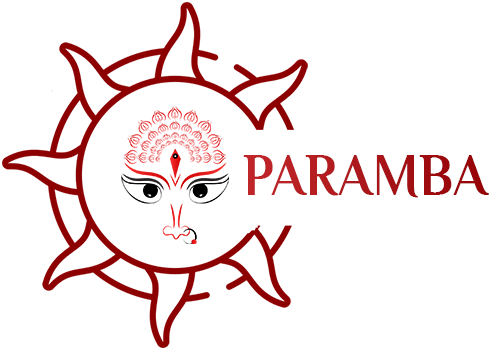
<style>
.page{position:relative;width:500px;height:350px;background:#ffffff}
.page>*{position:absolute;margin:0}
.t1{font:60.1px "Philosopher-Bold";color:#ab171a;scale:0.89 1}
</style>
<div class="page">
<p class="t1" style="left:243px;top:155px;width:246px;height:43px">PARAMBA</p>
</div>
